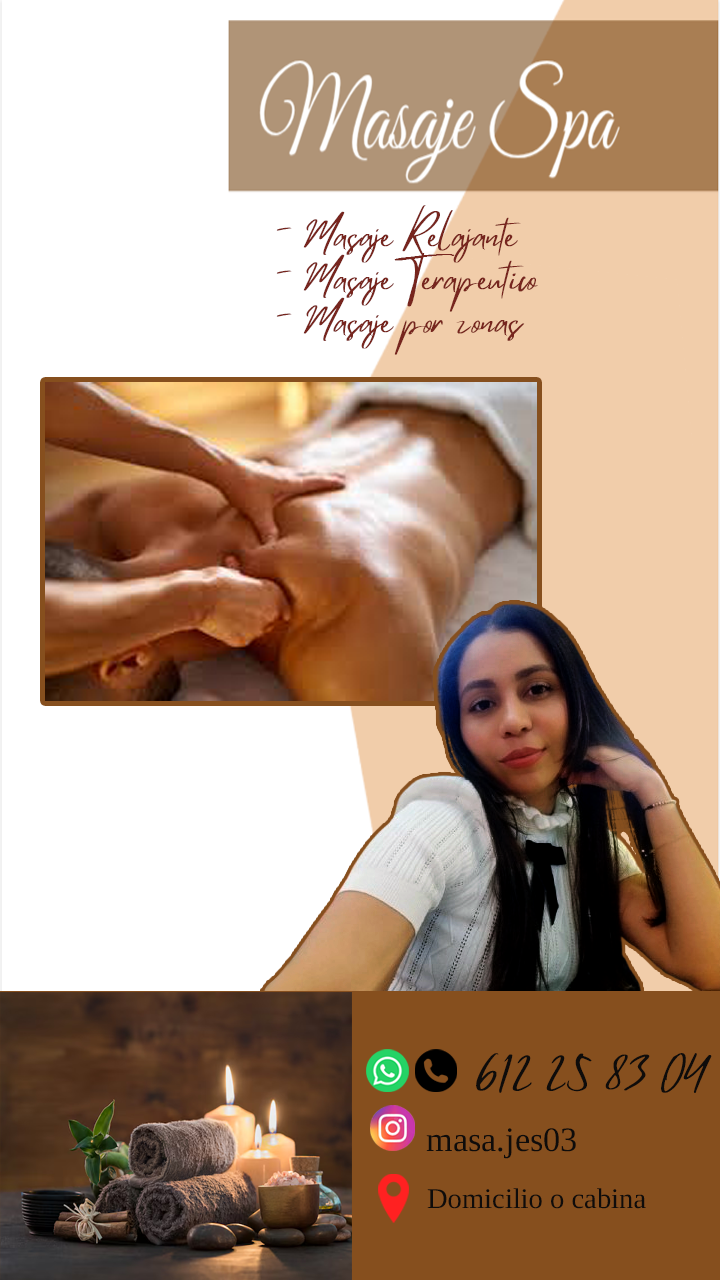
<style>
.page{position:relative;width:720px;height:1280px;background:#ffffff}
.page>*{position:absolute;margin:0}
.t1{font:36px "MistrullyRegular";color:#77251e}
.t2{font:42px "MistrullyRegular";color:#0e0c0b}
.t3{font:34.2px "Georgia";color:#0e0c0b}
.t4{font:28.5px "Georgia";color:#0e0c0b}
</style>
<div class="page">
<p class="t1" style="left:276px;top:205px;width:262px;height:150px">- Masaje Relajante<br>- Masaje Terapéutico<br>- Masaje por zonas</p>
<p class="t2" style="left:476px;top:1053px;width:236px;height:40px">612 25 83 04</p>
<p class="t3" style="left:426px;top:1128px;width:150px;height:31px">masa.jes03</p>
<p class="t4" style="left:427px;top:1188px;width:219px;height:21px">Domicilio o cabina</p>
</div>
